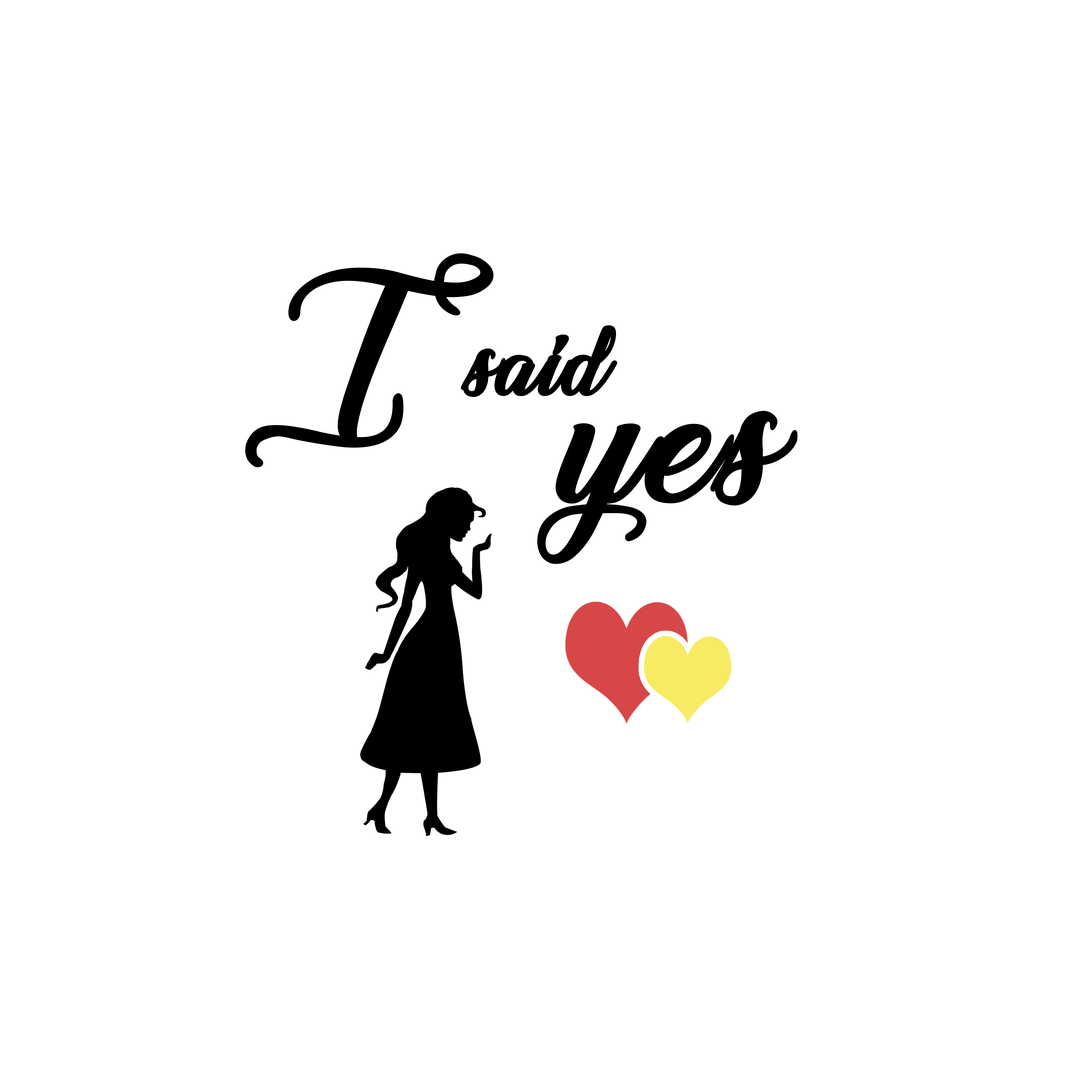
<style>
.page{position:relative;width:1092px;height:1092px;background:#ffffff}
.page>*{position:absolute;margin:0}
.t1{font:392px "Special-Valentine";color:#000000;font-weight:bold}
.t2{font:177.5px "Special-Valentine";color:#000000;font-weight:bold}
.t3{font:355.2px "Special-Valentine";color:#000000;font-weight:bold}
</style>
<div class="page">
<p class="t1" style="left:245px;top:253px;width:249px;height:214px">I</p>
<p class="t2" style="left:461px;top:325px;width:156px;height:72px">said</p>
<p class="t3" style="left:537px;top:411px;width:261px;height:153px">yes</p>
</div>
